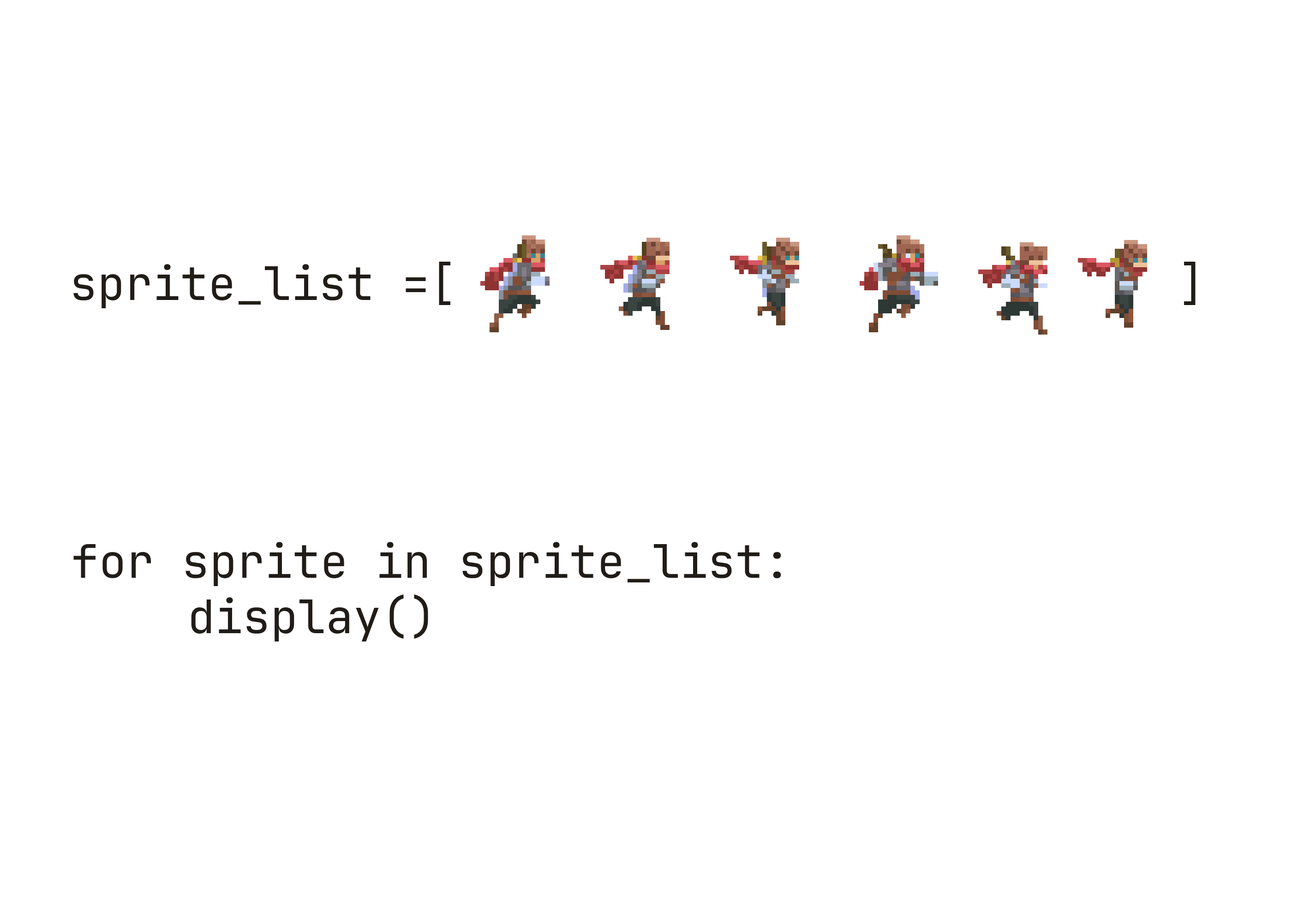
<style>
.page{position:relative;width:1292px;height:923px;background:#ffffff}
.page>*{position:absolute;margin:0}
.t1{font:46.1px "JetBrainsMono-Regular";color:#201c18}
</style>
<div class="page">
<p class="t1" style="left:73px;top:262px;width:1123px;height:46px">sprite_list =[                          ]</p>
<p class="t1" style="left:73px;top:542px;width:708px;height:99px">for sprite in sprite_list:<br>       display()</p>
</div>
